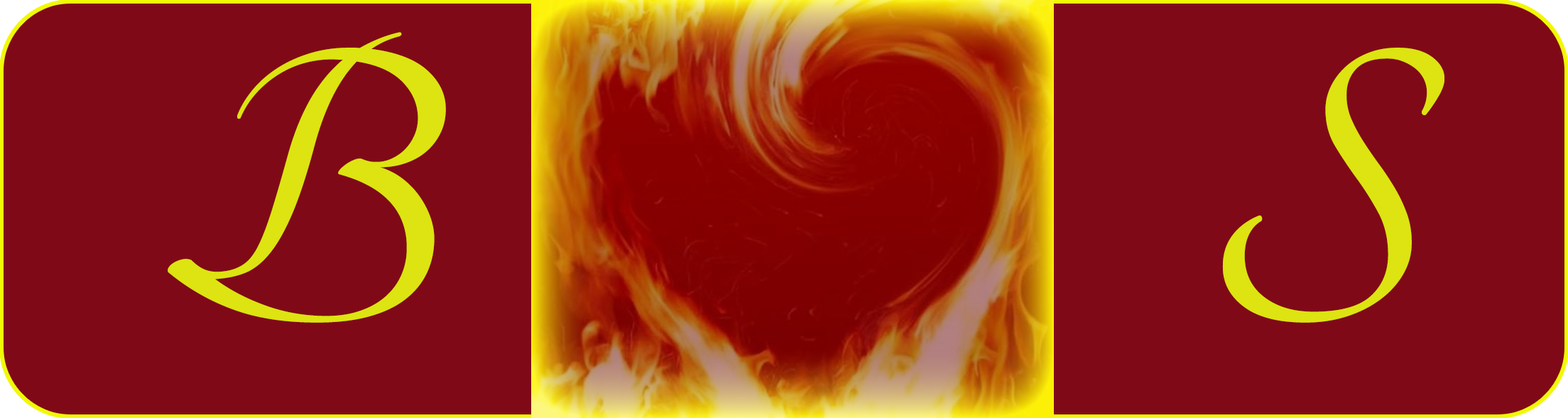
<style>
.page{position:relative;width:1568px;height:418px;background:#800917}
.page>*{position:absolute;margin:0}
.t1{font:426.1px "Tangerine-Bold";color:#dde411}
</style>
<div class="page">
<p class="t1" style="left:168px;top:32px;width:278px;height:290px">B</p>
<p class="t1" style="left:1222px;top:48px;width:222px;height:274px">S</p>
</div>
